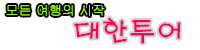
<style>
.page{position:relative;width:200px;height:50px;background:#ffffff}
.page>*{position:absolute;margin:0}
.t1{font:13px "Gulim";color:#9dff00}
.t2{font:28px "H2porM";color:#ff0055}
</style>
<div class="page">
<p class="t1" style="left:6px;top:4px;width:99px;height:12px">모든 여행의 시작</p>
<p class="t2" style="left:74px;top:17px;width:107px;height:27px">대한투어</p>
</div>
